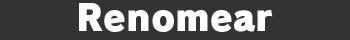
<style>
.page{position:relative;width:350px;height:40px;background:#333333}
.page>*{position:absolute;margin:0}
.t1{font:36px "RodinPro-UB";color:#fffeff}
</style>
<div class="page">
<p class="t1" style="left:79px;top:3px;width:194px;height:29px">Renomear</p>
</div>
